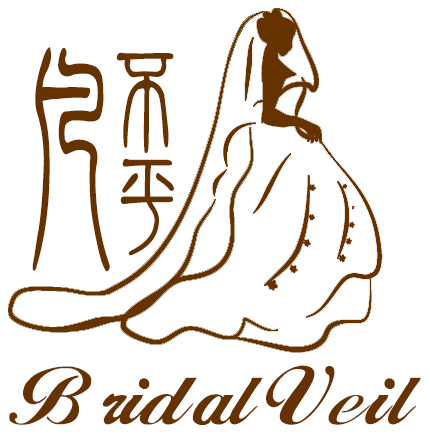
<style>
.page{position:relative;width:430px;height:434px;background:#ffffff}
.page>*{position:absolute;margin:0}
.t1{font:249.5px "FZXZTFW--GB1-0";color:#663300;scale:0.62 1}
.t2{font:109.4px/234.4px "FZXZTFW--GB1-0";color:#663300}
.t3{font:87.6px "DATC5";color:#663300}
</style>
<div class="page">
<p class="t1" style="left:32px;top:47px;width:78px;height:225px">凡</p>
<p class="t2" style="left:116px;top:52px;width:58px;height:204px">不平</p>
<p class="t3" style="left:9px;top:365px;width:412px;height:60px">Bridal Veil</p>
</div>
